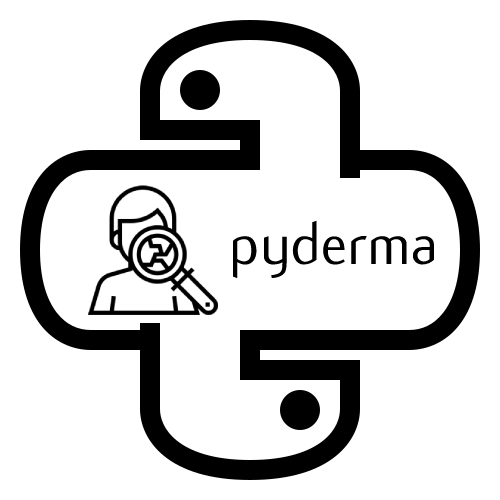
<style>
.page{position:relative;width:500px;height:500px;background:#ffffff}
.page>*{position:absolute;margin:0}
.t1{font:62px "Flux";color:#000000}
</style>
<div class="page">
<p class="t1" style="left:232px;top:220px;width:202px;height:59px">pyderma</p>
</div>
